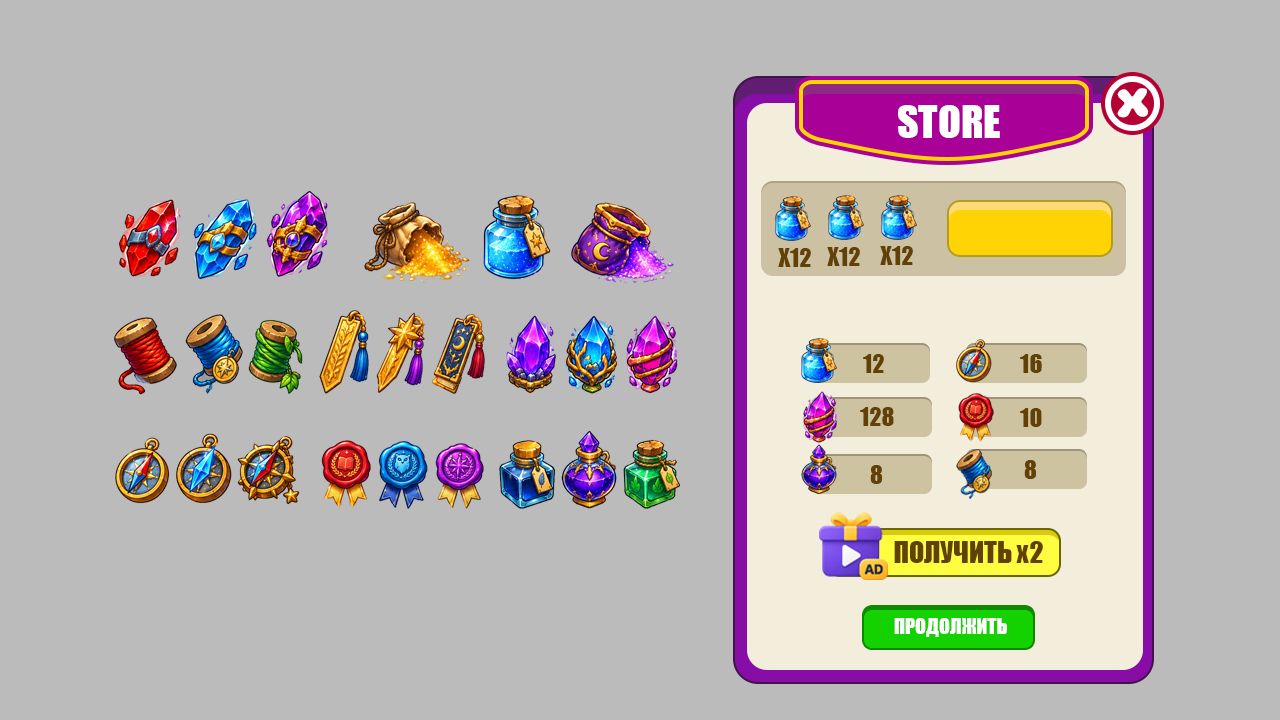
<style>
.page{position:relative;width:1280px;height:720px;background:#bbbbbb}
.page>*{position:absolute;margin:0}
.t1{font:46.4px "PaindeMie-Regular";color:#ffffff;scale:1.56 1}
.t2{font:42px "Impact";color:#ffffff}
.t3{font:24px "Impact";color:#624107}
.t4{font:28px "Impact";color:#624107}
.t5{font:20px "Impact";color:#ffffff}
</style>
<div class="page">
<p class="t1" style="left:1117px;top:88px;width:32px;height:30px">X</p>
<p class="t2" style="left:898px;top:105px;width:102px;height:33px">STORE</p>
<p class="t3" style="left:880px;top:246px;width:33px;height:19px">X12</p>
<p class="t3" style="left:778px;top:248px;width:33px;height:19px">X12</p>
<p class="t3" style="left:827px;top:247px;width:33px;height:19px">X12</p>
<p class="t3" style="left:863px;top:354px;width:21px;height:19px">12</p>
<p class="t3" style="left:1020px;top:354px;width:22px;height:19px">16</p>
<p class="t3" style="left:860px;top:407px;width:34px;height:19px">128</p>
<p class="t3" style="left:1020px;top:408px;width:22px;height:19px">10</p>
<p class="t3" style="left:1024px;top:460px;width:12px;height:19px">8</p>
<p class="t3" style="left:870px;top:465px;width:12px;height:19px">8</p>
<p class="t4" style="left:894px;top:541px;width:149px;height:22px">ПОЛУЧИТЬ х2</p>
<p class="t5" style="left:894px;top:618px;width:113px;height:19px">ПРОДОЛЖИТЬ</p>
</div>
